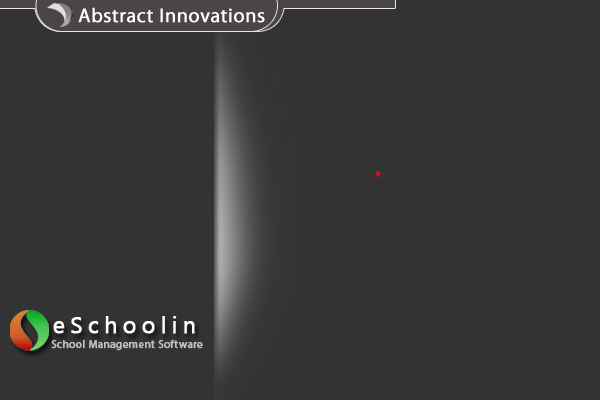
<style>
.page{position:relative;width:600px;height:400px;background:#333333}
.page>*{position:absolute;margin:0}
.t1{font:20px "MyriadPro-Regular";letter-spacing:0.01em;color:#ffffff;font-weight:bold}
.t2{font:16px "MyriadPro-Regular";color:#ff031b}
.t3{font:23.4px "SegoeUI";letter-spacing:0.2em;color:#fefdfd;font-weight:bold}
.t4{font:10.9px "MyriadPro-Regular";letter-spacing:0.025em;color:#c0c0c0;font-weight:bold}
</style>
<div class="page">
<p class="t1" style="left:78px;top:7px;width:187px;height:16px">Abstract Innovations</p>
<p class="t2" style="left:375px;top:171px;width:6px;height:6px">*</p>
<p class="t3" style="left:53px;top:316px;width:142px;height:18px">eSchoolin</p>
<p class="t4" style="left:51px;top:340px;width:152px;height:11px">School Management Software</p>
</div>
